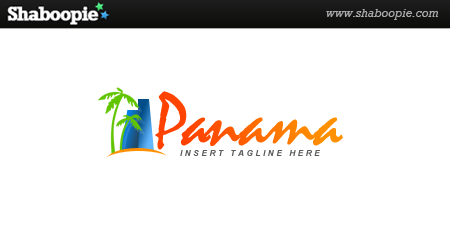
<style>
.page{position:relative;width:450px;height:250px;background:#ffffff}
.page>*{position:absolute;margin:0}
.t1{font:75px "Mistral"}
.t2{font:75px "Mistral";letter-spacing:-0.075em}
.t3{font:8.3px "Arial-BoldItalicMT";letter-spacing:0.3em;color:#5c5c5c}
</style>
<div class="page">
<p class="t1" style="left:155px;top:91px;width:188px;height:59px"><span class="t2">Pa</span>nama</p>
<p class="t3" style="left:180px;top:150px;width:140px;height:6px">INSERT TAGLINE HERE</p>
</div>
